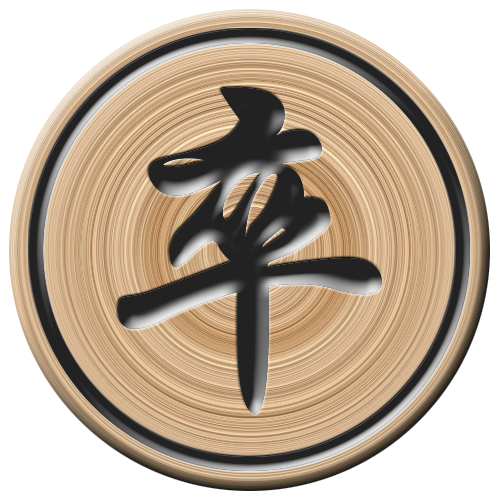
<style>
.page{position:relative;width:500px;height:500px;background:#ffffff}
.page>*{position:absolute;margin:0}
.t1{font:360px "STXingkai"}
</style>
<div class="page">
<p class="t1" style="left:118px;top:87px;width:264px;height:327px">卒</p>
</div>
